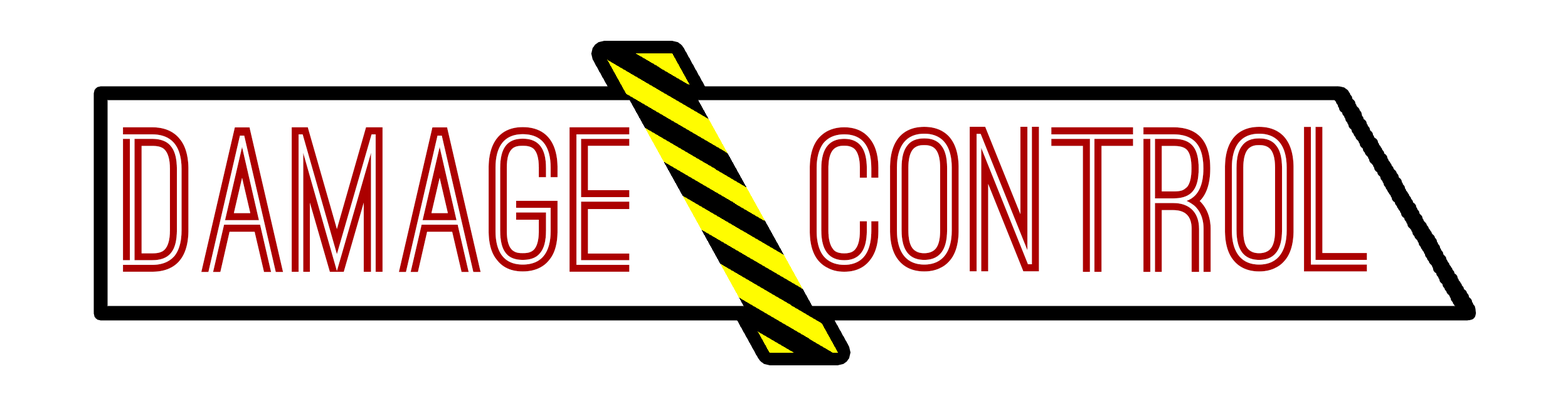
<style>
.page{position:relative;width:1568px;height:408px;background:#ffffff}
.page>*{position:absolute;margin:0}
.t1{font:196px "OstrichSans-Bold";color:#ac0000}
</style>
<div class="page">
<p class="t1" style="left:123px;top:127px;width:507px;height:145px">Damage</p>
<p class="t1" style="left:810px;top:127px;width:557px;height:145px">Control</p>
</div>
